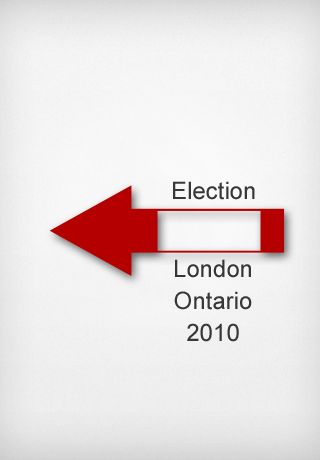
<style>
.page{position:relative;width:320px;height:460px}
.page>*{position:absolute;margin:0}
.t1{font:24px "ArialMT";color:#373737}
.t2{font:24px/32px "ArialMT";color:#373737}
</style>
<div class="page">
<p class="t1" style="left:173px;top:181px;width:82px;height:19px">Election</p>
<p class="t2" style="left:174px;top:259px;width:78px;height:83px;text-align:center">London<br>Ontario<br>2010</p>
</div>
